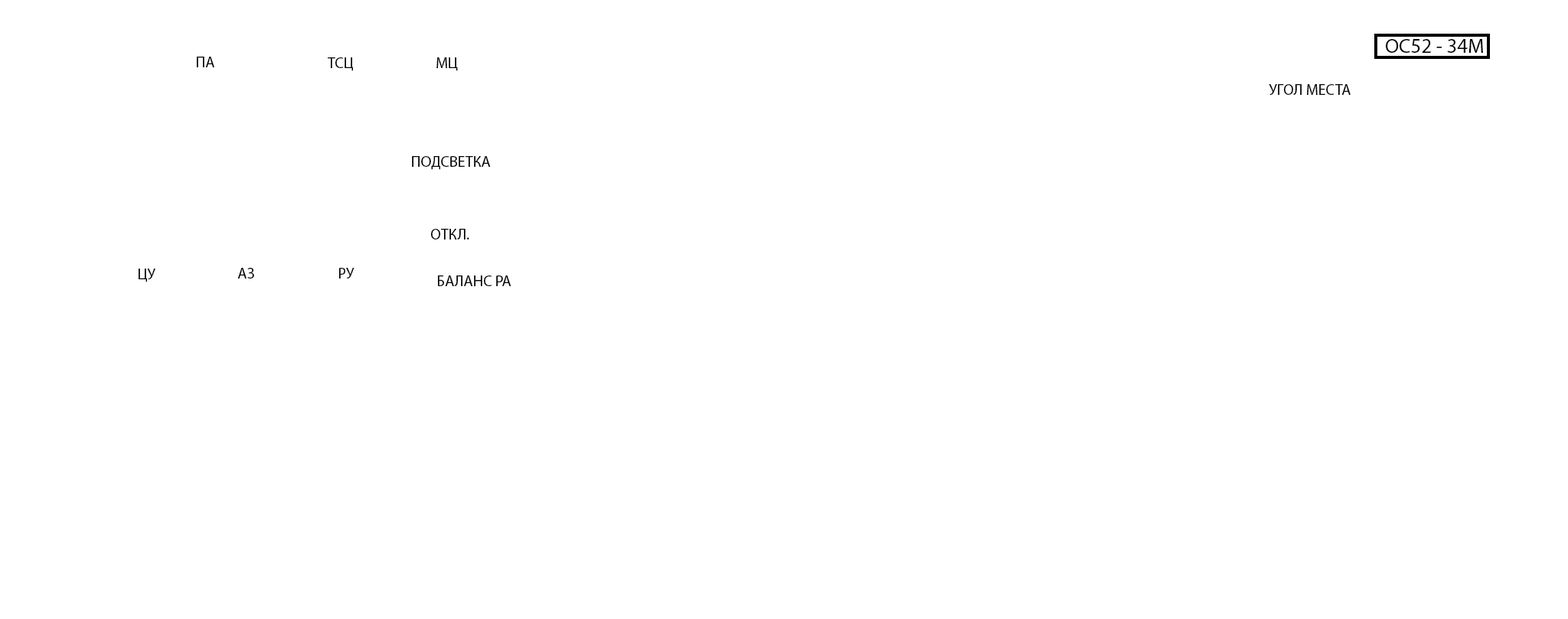
<style>
.page{position:relative;width:1568px;height:619px;background:#ffffff}
.page>*{position:absolute;margin:0}
.t1{font:20.4px "MyriadPro-Regular";color:#000000}
.t2{font:15.3px "MyriadPro-Regular";color:#000000}
</style>
<div class="page">
<p class="t1" style="left:1386px;top:39px;width:97px;height:14px">ОС52 - 34М</p>
<p class="t2" style="left:197px;top:57px;width:17px;height:10px">ПА</p>
<p class="t2" style="left:328px;top:57px;width:25px;height:14px">ТСЦ</p>
<p class="t2" style="left:436px;top:57px;width:22px;height:14px">МЦ</p>
<p class="t2" style="left:1269px;top:84px;width:82px;height:11px">УГОЛ МЕСТА</p>
<p class="t2" style="left:412px;top:156px;width:79px;height:14px">ПОДСВЕТКА</p>
<p class="t2" style="left:431px;top:229px;width:38px;height:11px">ОТКЛ.</p>
<p class="t2" style="left:139px;top:269px;width:16px;height:14px">ЦУ</p>
<p class="t2" style="left:237px;top:268px;width:17px;height:11px">АЗ</p>
<p class="t2" style="left:339px;top:268px;width:15px;height:11px">РУ</p>
<p class="t2" style="left:438px;top:276px;width:73px;height:10px">БАЛАНС РА</p>
</div>
